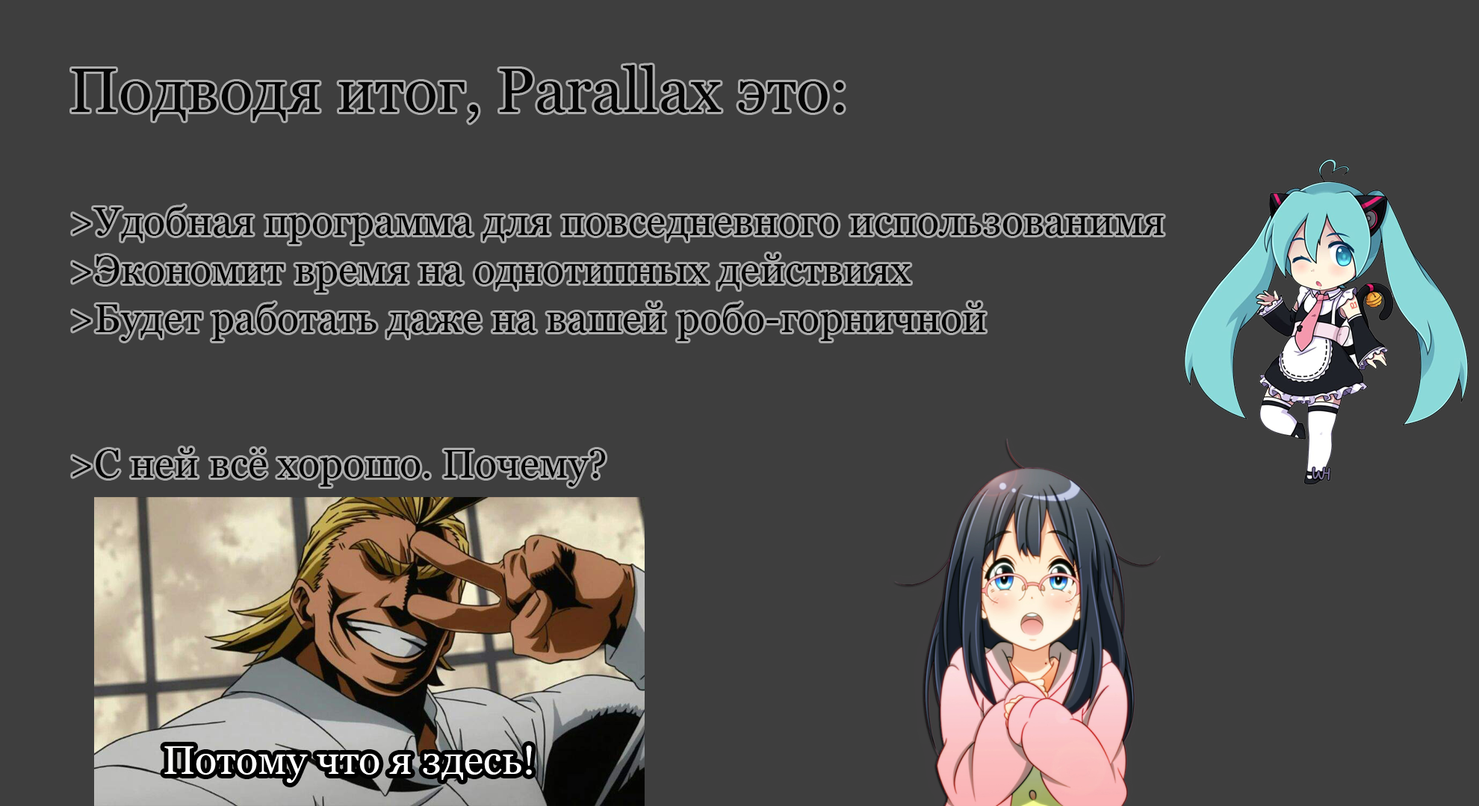
<style>
.page{position:relative;width:1479px;height:806px;background:#3e3e3e}
.page>*{position:absolute;margin:0}
.t1{font:40.4px "Georgia";color:#050505}
.t2{font:62.2px "Georgia";color:#050505}
.t3{font:40.4px "Georgia";color:#ffffff}
</style>
<div class="page">
<p class="t1" style="left:72px;top:65px;width:1091px;height:422px"><span class="t2">Подводя итог, Parallax это:<br><br></span>&gt;Удобная программа для повседневного использованимя<br>&gt;Экономит время на однотипных действиях<br>&gt;Будет работать даже на вашей робо-горничной<br><br><br>&gt;С ней всё хорошо. Почему?</p>
<p class="t3" style="left:164px;top:746px;width:368px;height:37px">Потому что я здесь!</p>
</div>
